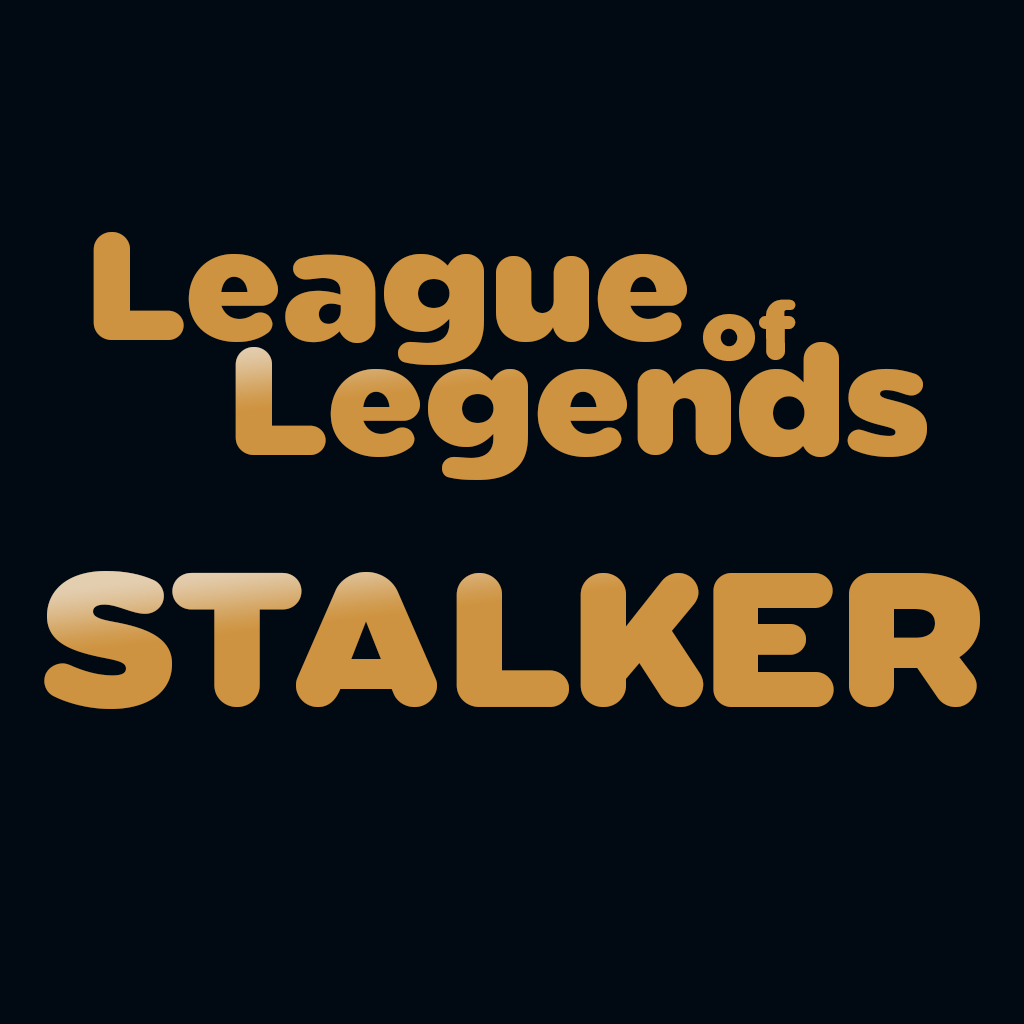
<style>
.page{position:relative;width:1024px;height:1024px;background:#010a13}
.page>*{position:absolute;margin:0}
.t1{font:160px "Sabandija-ffp";color:#ce9340}
.t2{font:85px "Sabandija-ffp";color:#ce9340}
.t3{font:200px "Sabandija-ffp";color:#ce9340}
</style>
<div class="page">
<p class="t1" style="left:93px;top:232px;width:594px;height:133px">League</p>
<p class="t2" style="left:703px;top:299px;width:93px;height:62px">of</p>
<p class="t1" style="left:235px;top:342px;width:692px;height:138px">Legends</p>
<p class="t3" style="left:44px;top:571px;width:936px;height:138px">STALKER</p>
</div>
